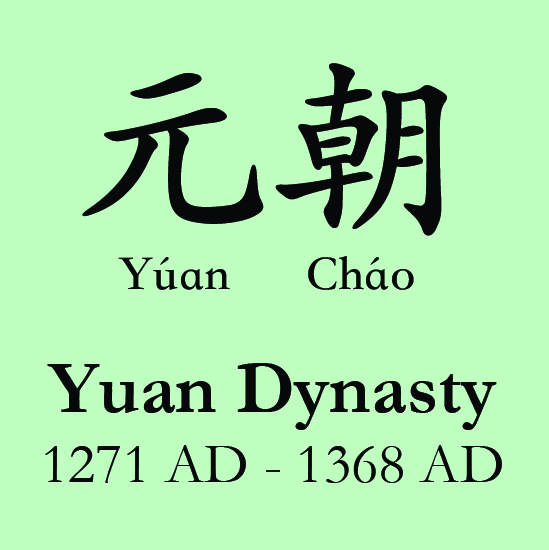
<style>
.page{position:relative;width:549px;height:550px;background:#bfffbf}
.page>*{position:absolute;margin:0}
.t1{font:200px "STKaiti-SC-Bold";color:#070809}
.t2{font:50px "STKaiti-SC-Bold";color:#070809}
.t3{font:58.3px "Garamond";color:#070809}
.t4{font:75px "Garamond-Bold";color:#070809}
</style>
<div class="page">
<p class="t1" style="left:82px;top:63px;width:365px;height:173px">元朝</p>
<p class="t2" style="left:118px;top:256px;width:296px;height:34px">Yúan      Cháo</p>
<p class="t3" style="left:45px;top:363px;width:457px;height:120px;text-align:center"><span class="t4">Yuan Dynasty<br></span>1271 AD - 1368 AD</p>
</div>
